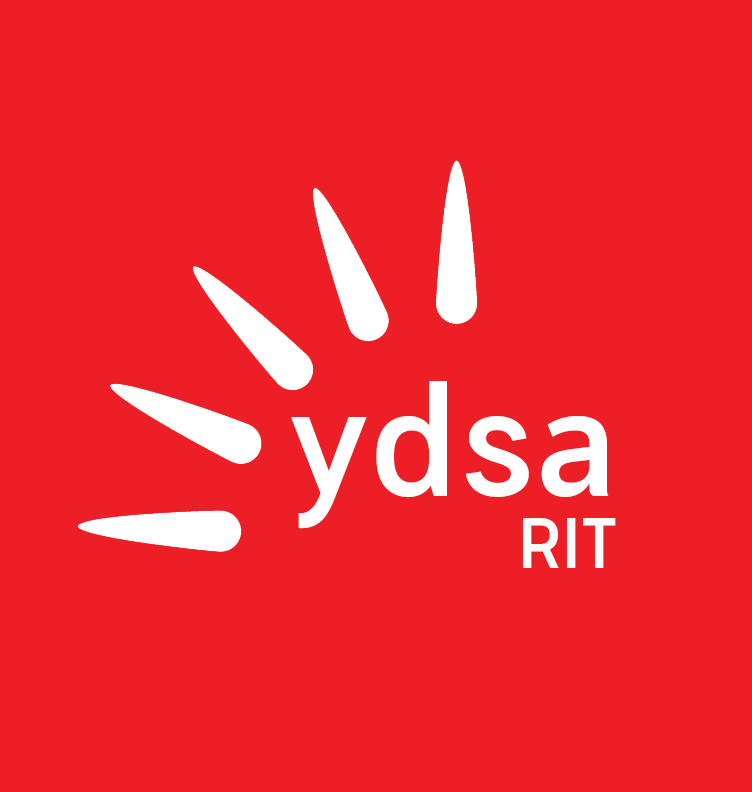
<style>
.page{position:relative;width:752px;height:792px;background:#ec1f27}
.page>*{position:absolute;margin:0}
.t1{font:158.5px/72px "ManifoldDSA-Bold";color:#ffffff}
.t2{font:72px/72px "ManifoldDSA-Bold";color:#fbfbfb}
</style>
<div class="page">
<p class="t1" style="left:291px;top:381px;width:325px;height:187px;text-align:right">ydsa<br><span class="t2">RIT</span></p>
</div>
